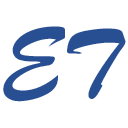
<style>
.page{position:relative;width:128px;height:128px;background:#ffffff}
.page>*{position:absolute;margin:0}
.t1{font:100px "BrushScriptMT";color:#294f93}
</style>
<div class="page">
<p class="t1" style="left:3px;top:26px;width:123px;height:76px">ET</p>
</div>
